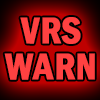
<style>
.page{position:relative;width:100px;height:100px;background:#ff4141}
.page>*{position:absolute;margin:0}
.t1{font:38.2px/36.2px "FranklinGothic-DemiCond";color:#ff4141;font-weight:bold}
</style>
<div class="page">
<p class="t1" style="left:4px;top:17px;width:91px;height:63px;text-align:center">VRS<br>WARN</p>
</div>
